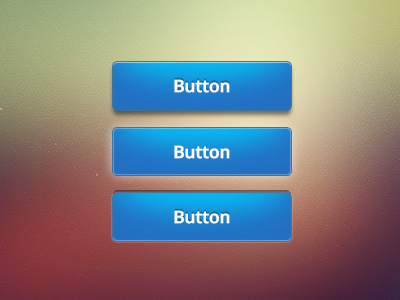
<style>
.page{position:relative;width:400px;height:300px}
.page>*{position:absolute;margin:0}
.t1{font:17.3px "OpenSans-Semibold";letter-spacing:-0.025em;color:#ffffff;font-weight:bold}
</style>
<div class="page">
<p class="t1" style="left:174px;top:79px;width:56px;height:14px">Button</p>
<p class="t1" style="left:174px;top:145px;width:56px;height:14px">Button</p>
<p class="t1" style="left:174px;top:210px;width:56px;height:14px">Button</p>
</div>
